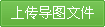
<style>
.page{position:relative;width:105px;height:27px}
.page>*{position:absolute;margin:0}
.t1{font:14px "SimSun";color:#ffffff}
</style>
<div class="page">
<p class="t1" style="left:11px;top:6px;width:83px;height:13px">上传导图文件</p>
</div>
